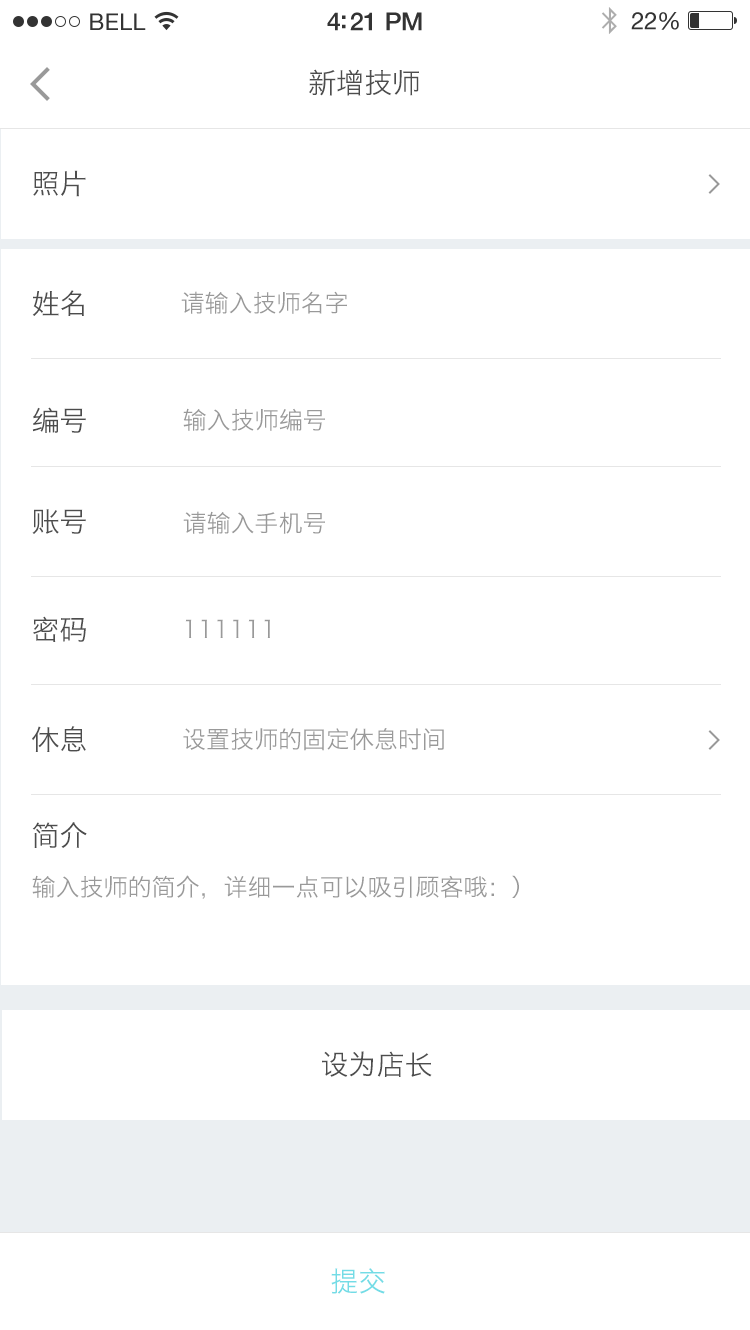
<style>
.page{position:relative;width:750px;height:1330px;background:#ffffff}
.page>*{position:absolute;margin:0}
.t1{font:28px "HiraginoSansGB-W3";color:#4d4d4d}
.t2{font:28px "HiraginoSansGB-W3";color:#4c4c4c}
.t3{font:24px "HiraginoSansGB-W3";color:#999999}
.t4{font:28px "HiraginoSansGB-W3";color:#73dce6}
</style>
<div class="page">
<p class="t1" style="left:309px;top:69px;width:111px;height:27px">新增技师</p>
<p class="t1" style="left:33px;top:170px;width:53px;height:27px">照片</p>
<p class="t2" style="left:32px;top:290px;width:52px;height:26px">姓名</p>
<p class="t3" style="left:181px;top:291px;width:166px;height:23px">请输入技师名字</p>
<p class="t2" style="left:32px;top:407px;width:54px;height:26px">编号</p>
<p class="t3" style="left:183px;top:408px;width:142px;height:23px">输入技师编号</p>
<p class="t1" style="left:32px;top:509px;width:54px;height:25px">账号</p>
<p class="t3" style="left:183px;top:511px;width:142px;height:23px">请输入手机号</p>
<p class="t1" style="left:33px;top:616px;width:53px;height:26px">密码</p>
<p class="t3" style="left:185px;top:619px;width:85px;height:19px">111111</p>
<p class="t1" style="left:32px;top:726px;width:54px;height:26px">休息</p>
<p class="t3" style="left:183px;top:728px;width:261px;height:23px">设置技师的固定休息时间</p>
<p class="t2" style="left:32px;top:822px;width:55px;height:26px">简介</p>
<p class="t3" style="left:32px;top:875px;width:487px;height:24px">输入技师的简介，详细一点可以吸引顾客哦：）</p>
<p class="t1" style="left:322px;top:1051px;width:110px;height:26px">设为店长</p>
<p class="t4" style="left:331px;top:1268px;width:54px;height:26px">提交</p>
</div>
